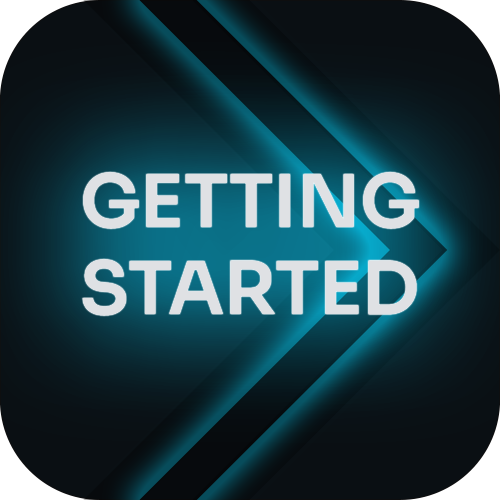
<style>
.page{position:relative;width:500px;height:500px}
.page>*{position:absolute;margin:0}
.t1{font:72.8px "Sora-SemiBold";color:#dfe1e4}
</style>
<div class="page">
<p class="t1" style="left:82px;top:172px;width:337px;height:144px;text-align:center">GETTING<br>STARTED</p>
</div>
